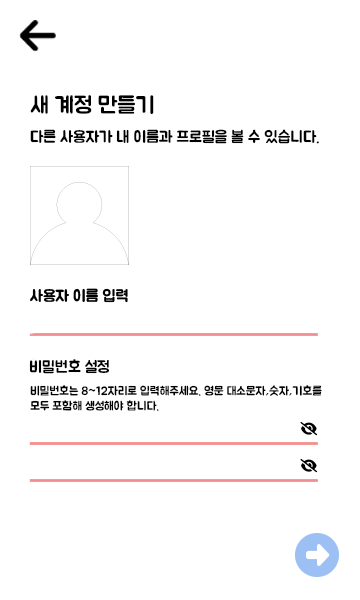
<style>
.page{position:relative;width:360px;height:600px;background:#ffffff}
.page>*{position:absolute;margin:0}
.t1{font:23px "BMJUA";color:#000000}
.t2{font:16px "BMJUA";color:#000000}
.t3{font:12px/15px "BMJUA";color:#000000}
</style>
<div class="page">
<p class="t1" style="left:30px;top:95px;width:124px;height:19px">새 계정 만들기</p>
<p class="t2" style="left:30px;top:129px;width:289px;height:15px">다른 사용자가 내 이름과 프로필을 볼 수 있습니다.</p>
<p class="t2" style="left:29px;top:359px;width:81px;height:15px">비밀번호 설정</p>
<p class="t3" style="left:30px;top:385px;width:292px;height:26px">비밀번호는 8~12자리로 입력해주세요. 영문 대소문자,숫자,기호를<br>모두 포함해 생성해야 합니다.</p>
</div>
